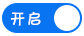
<style>
.page{position:relative;width:84px;height:36px;background:#0874f1}
.page>*{position:absolute;margin:0}
.t1{font:16px "Jkaton";letter-spacing:0.05em;color:#ffffff}
</style>
<div class="page">
<p class="t1" style="left:11px;top:11px;width:30px;height:15px">开启</p>
</div>
